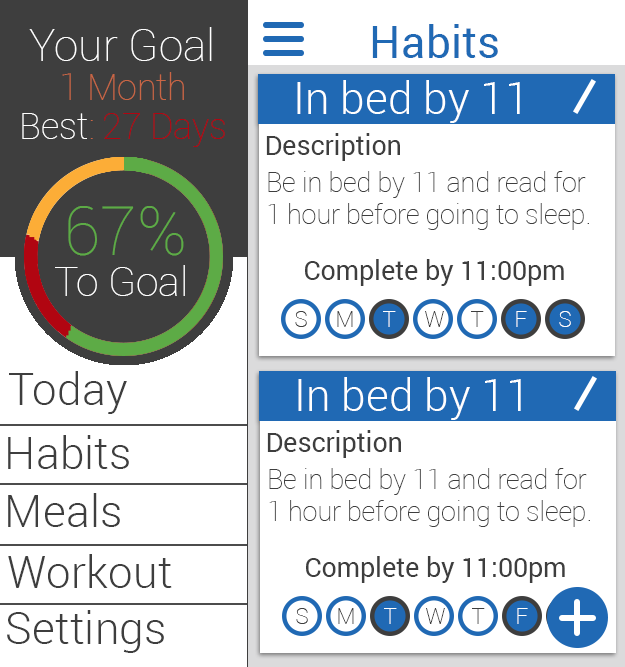
<style>
.page{position:relative;width:625px;height:667px;background:#ffffff}
.page>*{position:absolute;margin:0}
.t1{font:44.4px "Roboto-Thin";color:#ffffff}
.t2{font:44.4px "Roboto-Regular";color:#2069b4}
.t3{font:35.6px "Roboto-Thin";color:#c96645}
.t4{font:44.3px "Roboto-Light";color:#ffffff}
.t5{font:35.6px "Roboto-Thin";color:#b10511}
.t6{font:35.6px "Roboto-Thin";color:#ffffff}
.t7{font:26.7px "Roboto-Regular";color:#3e3e3e}
.t8{font:26.7px "Roboto-Thin";color:#3e3e3e}
.t9{font:68.4px "Roboto-Thin";color:#5dab46}
.t10{font:40.8px "Roboto-Thin";color:#ffffff}
.t11{font:22.2px "Roboto-Thin";color:#3e3e3e}
.t12{font:22.2px "Roboto-Thin";color:#ffffff}
.t13{font:44.4px "Roboto-Light";color:#3e3e3e}
</style>
<div class="page">
<p class="t1" style="left:29px;top:27px;width:183px;height:34px">Your Goal</p>
<p class="t2" style="left:372px;top:24px;width:126px;height:34px">Habits</p>
<p class="t3" style="left:62px;top:72px;width:122px;height:28px">1 Month</p>
<p class="t4" style="left:297px;top:80px;width:223px;height:43px">In bed by 11</p>
<p class="t5" style="left:22px;top:113px;width:203px;height:34px"><span class="t6">Best</span><span class="t3">: </span>27 Days</p>
<p class="t7" style="left:266px;top:133px;width:134px;height:28px">Description</p>
<p class="t8" style="left:268px;top:171px;width:321px;height:59px">Be in bed by 11 and read for <br>1 hour before going to sleep.</p>
<p class="t9" style="left:68px;top:206px;width:116px;height:50px">67%</p>
<p class="t10" style="left:55px;top:265px;width:130px;height:31px">To Goal</p>
<p class="t7" style="left:305px;top:259px;width:259px;height:27px">Complete by 11:00pm</p>
<p class="t11" style="left:295px;top:311px;width:12px;height:16px">S</p>
<p class="t11" style="left:337px;top:311px;width:16px;height:16px">M</p>
<p class="t12" style="left:383px;top:311px;width:13px;height:16px">T</p>
<p class="t11" style="left:425px;top:311px;width:19px;height:16px">W</p>
<p class="t11" style="left:471px;top:311px;width:13px;height:16px">T</p>
<p class="t12" style="left:516px;top:311px;width:11px;height:16px">F</p>
<p class="t12" style="left:559px;top:311px;width:12px;height:16px">S</p>
<p class="t13" style="left:9px;top:371px;width:118px;height:43px">Today</p>
<p class="t4" style="left:298px;top:377px;width:223px;height:43px">In bed by 11</p>
<p class="t13" style="left:8px;top:435px;width:121px;height:34px">Habits</p>
<p class="t7" style="left:267px;top:430px;width:134px;height:28px">Description</p>
<p class="t8" style="left:269px;top:468px;width:321px;height:59px">Be in bed by 11 and read for <br>1 hour before going to sleep.</p>
<p class="t13" style="left:8px;top:493px;width:112px;height:34px">Meals</p>
<p class="t13" style="left:8px;top:554px;width:164px;height:34px">Workout</p>
<p class="t7" style="left:306px;top:556px;width:259px;height:27px">Complete by 11:00pm</p>
<p class="t13" style="left:7px;top:610px;width:157px;height:43px">Settings</p>
<p class="t11" style="left:296px;top:608px;width:12px;height:16px">S</p>
<p class="t11" style="left:338px;top:608px;width:16px;height:16px">M</p>
<p class="t12" style="left:384px;top:608px;width:13px;height:16px">T</p>
<p class="t11" style="left:426px;top:608px;width:19px;height:16px">W</p>
<p class="t11" style="left:472px;top:608px;width:13px;height:16px">T</p>
<p class="t12" style="left:517px;top:608px;width:11px;height:16px">F</p>
</div>
